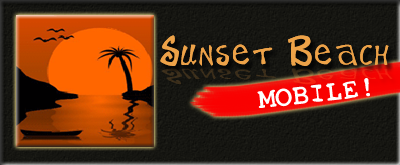
<style>
.page{position:relative;width:400px;height:165px}
.page>*{position:absolute;margin:0}
.t1{font:38px "BeachTypeMedium";color:#eda248}
.t2{font:28px "Toxica";color:#fefefe}
</style>
<div class="page">
<p class="t1" style="left:160px;top:35px;width:229px;height:31px">Sunset Beach</p>
<p class="t1" style="left:160px;top:35px;width:229px;height:31px">Sunset Beach</p>
<p class="t2" style="left:257px;top:78px;width:113px;height:30px;rotate:-6deg">MOBILE!</p>
</div>
